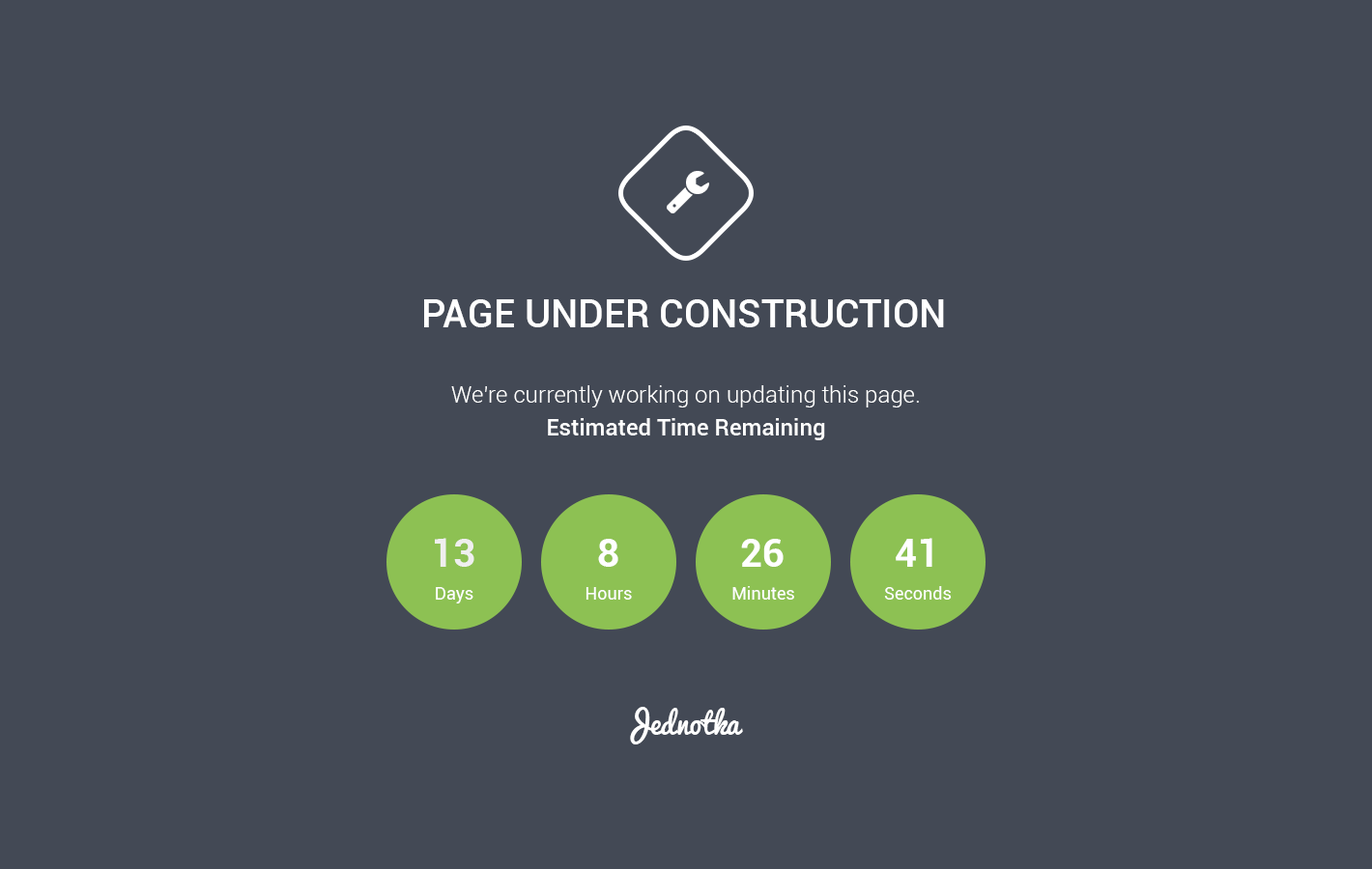
<style>
.page{position:relative;width:1372px;height:869px;background:#434955}
.page>*{position:absolute;margin:0}
.t1{font:38.6px "Roboto-Medium";color:#ffffff;text-transform:uppercase}
.t2{font:23.2px/32.8px "Roboto-Light";color:#ffffff}
.t3{font:23.2px/32.8px "Roboto-Medium";color:#ffffff}
.t4{font:38.6px "Roboto-Bold";color:#efefef}
.t5{font:38.6px "Roboto-Bold";color:#ffffff}
.t6{font:17.4px "Roboto-Regular";color:#ffffff}
.t7{font:29px "Pacifico";color:#ffffff}
</style>
<div class="page">
<p class="t1" style="left:424px;top:299px;width:520px;height:28px">Page under construction</p>
<p class="t2" style="left:451px;top:385px;width:468px;height:55px;text-align:center">We're currently working on updating this page.<br><span class="t3">Estimated Time Remaining</span></p>
<p class="t4" style="left:435px;top:538px;width:39px;height:29px">13</p>
<p class="t5" style="left:598px;top:539px;width:20px;height:28px">8</p>
<p class="t5" style="left:741px;top:539px;width:42px;height:28px">26</p>
<p class="t5" style="left:895px;top:538px;width:37px;height:29px">41</p>
<p class="t6" style="left:436px;top:587px;width:37px;height:17px">Days</p>
<p class="t6" style="left:585px;top:587px;width:47px;height:13px">Hours</p>
<p class="t6" style="left:732px;top:586px;width:62px;height:14px">Minutes</p>
<p class="t6" style="left:884px;top:586px;width:67px;height:14px">Seconds</p>
<p class="t7" style="left:630px;top:707px;width:113px;height:38px">Jednotka</p>
</div>
